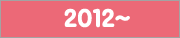
<style>
.page{position:relative;width:180px;height:38px;background:#ec6977}
.page>*{position:absolute;margin:0}
.t1{font:24px "icTTSunflowerB";color:#ffffff}
</style>
<div class="page">
<p class="t1" style="left:64px;top:8px;width:66px;height:20px">2012~</p>
<p class="t1" style="left:64px;top:8px;width:66px;height:20px">2012~</p>
</div>
